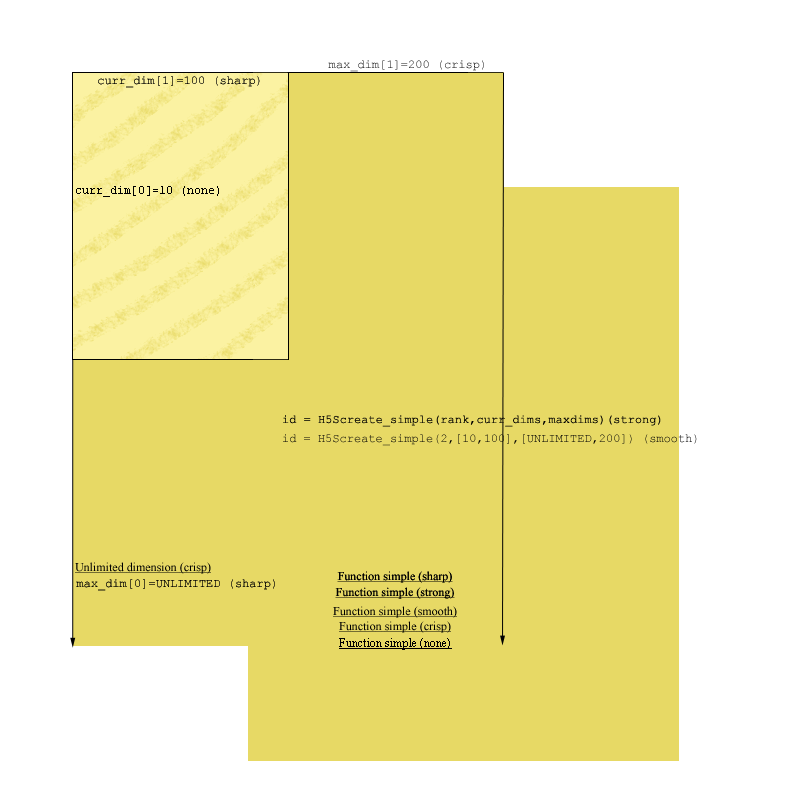
<style>
.page{position:relative;width:800px;height:800px;background:#e7d965}
.page>*{position:absolute;margin:0}
.t1{font:12px "CourierNewPSMT"}
.t2{font:12px "CourierNewPSMT";color:#000000}
.t3{font:12px "TimesNewRomanPSMT";color:#000000;text-decoration:underline}
</style>
<div class="page">
<p class="t1" style="left:328px;top:60px;width:156px;height:12px">max_dim[1]=200 (crisp)</p>
<p class="t2" style="left:98px;top:76px;width:162px;height:12px">curr_dim[1]=100 (sharp)</p>
<p class="t2" style="left:76px;top:186px;width:143px;height:11px">curr_dim[0]=10 (none)</p>
<p class="t2" style="left:283px;top:415px;width:378px;height:12px">id = H5Screate_simple(rank,curr_dims,maxdims)(strong)</p>
<p class="t2" style="left:283px;top:434px;width:414px;height:12px">id = H5Screate_simple(2,[10,100],[UNLIMITED,200]) (smooth)</p>
<p class="t3" style="left:75px;top:562px;width:136px;height:12px">Unlimited dimension (crisp)</p>
<p class="t2" style="left:76px;top:579px;width:199px;height:12px">max_dim[0]=UNLIMITED (sharp)</p>
<p class="t3" style="left:337px;top:571px;width:116px;height:12px">Function simple (sharp)</p>
<p class="t3" style="left:335px;top:587px;width:120px;height:12px">Function simple (strong)</p>
<p class="t3" style="left:333px;top:606px;width:124px;height:12px">Function simple (smooth)</p>
<p class="t3" style="left:339px;top:621px;width:112px;height:12px">Function simple (crisp)</p>
<p class="t3" style="left:339px;top:638px;width:113px;height:12px">Function simple (none)</p>
</div>
